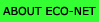
<style>
.page{position:relative;width:99px;height:22px;background:#33ff33}
.page>*{position:absolute;margin:0}
.t1{font:11px "Verdana";color:#000000}
</style>
<div class="page">
<p class="t1" style="left:3px;top:6px;width:93px;height:10px">ABOUT ECO-NET</p>
</div>
